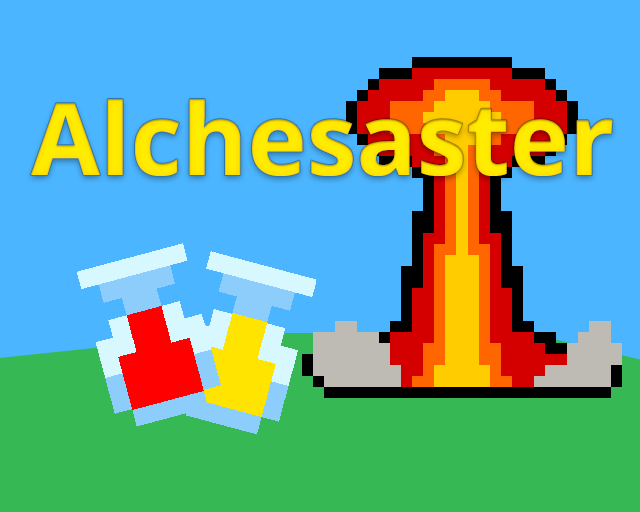
<style>
.page{position:relative;width:640px;height:512px;background:#4bb5ff}
.page>*{position:absolute;margin:0}
.t1{font:100px "OpenSans-Bold";color:#ffde00}
</style>
<div class="page">
<p class="t1" style="left:31px;top:99px;width:582px;height:77px">Alchesaster</p>
</div>
